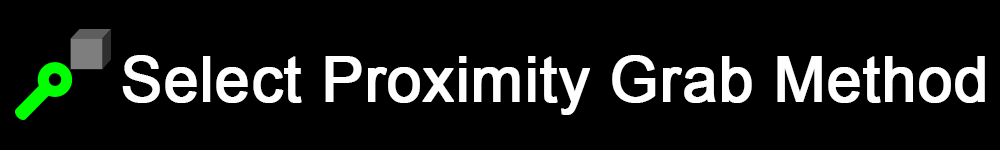
<style>
.page{position:relative;width:1000px;height:150px;background:#000000}
.page>*{position:absolute;margin:0}
.t1{font:62.5px "ArialMT";color:#fffefe;font-weight:bold}
</style>
<div class="page">
<p class="t1" style="left:122px;top:55px;width:863px;height:60px">Select Proximity Grab Method</p>
</div>
